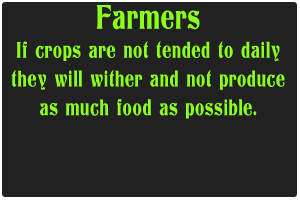
<style>
.page{position:relative;width:300px;height:200px;background:#212121}
.page>*{position:absolute;margin:0}
.t1{font:24px "Titania";letter-spacing:0.025em;color:#8cff1c;scale:0.7 1}
.t2{font:36px "Titania";letter-spacing:0.025em;color:#8cff1c;scale:0.7 1}
</style>
<div class="page">
<p class="t1" style="left:11px;top:5px;width:274px;height:114px;text-align:center"><span class="t2">Farmers<br></span>If crops are not tended to daily<br>they will wither and not produce<br>as much food as possible.</p>
</div>
